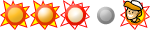
<style>
.page{position:relative;width:150px;height:30px;background:#ffffff}
.page>*{position:absolute;margin:0}
.t1{font:100px "Bigshot";letter-spacing:0.03em}
.t2{font:83.8px "Bigshot";letter-spacing:0.03em}
</style>
<div class="page">
<p class="t1" style="left:4px;top:4px;width:22px;height:22px;rotate:-33deg">.</p>
<p class="t1" style="left:34px;top:4px;width:22px;height:22px;rotate:-33deg">.</p>
<p class="t1" style="left:64px;top:4px;width:22px;height:22px;rotate:-33deg">.</p>
<p class="t2" style="left:97px;top:6px;width:18px;height:19px;rotate:180deg">.</p>
</div>
